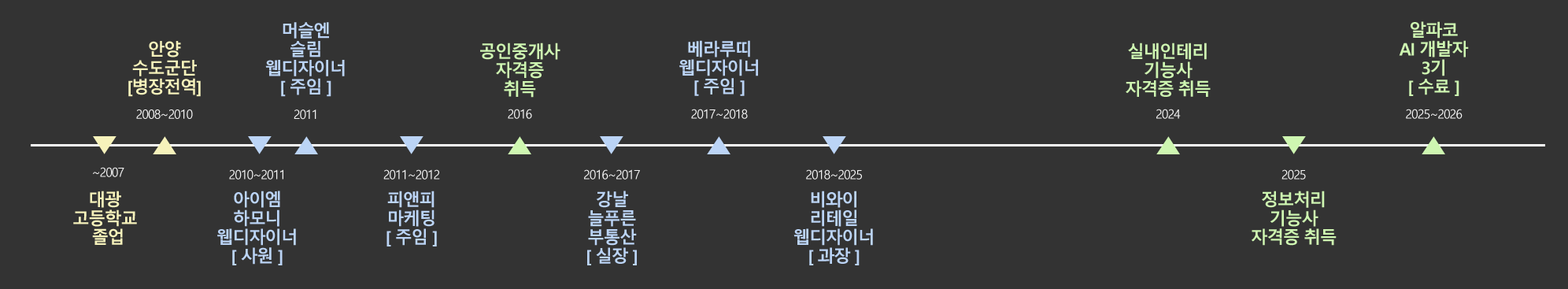
<style>
.page{position:relative;width:1568px;height:289px;background:#333333}
.page>*{position:absolute;margin:0}
.t1{font:17.3px/18.8px "MalgunGothicBold";letter-spacing:-0.07em;color:#bbd4f6}
.t2{font:17.3px/18.8px "MalgunGothicBold";letter-spacing:-0.07em;color:#cef6b1}
.t3{font:17.3px/18.8px "MalgunGothicBold";letter-spacing:-0.07em;color:#f6f2bb}
.t4{font:12.6px "MalgunGothic";letter-spacing:-0.07em;color:#f3f3f3}
</style>
<div class="page">
<p class="t1" style="left:265px;top:22px;width:80px;height:75px;text-align:center">머슬엔<br>슬림<br>웹디자이너<br>[ 주임 ]</p>
<p class="t2" style="left:1399px;top:21px;width:70px;height:75px;text-align:center">알파코<br>AI 개발자<br>3기<br>[ 수료 ]</p>
<p class="t3" style="left:128px;top:41px;width:73px;height:56px;text-align:center">안양<br>수도군단<br>[병장전역]</p>
<p class="t1" style="left:679px;top:40px;width:79px;height:56px;text-align:center">베라루띠<br>웹디자이너<br>[ 주임 ]</p>
<p class="t2" style="left:480px;top:43px;width:80px;height:55px;text-align:center">공인중개사<br>자격증<br>취득</p>
<p class="t2" style="left:1126px;top:43px;width:85px;height:54px;text-align:center">실내인테리<br>기능사<br>자격증 취득</p>
<p class="t4" style="left:136px;top:109px;width:57px;height:10px">2008~2010</p>
<p class="t4" style="left:294px;top:109px;width:22px;height:11px">2011</p>
<p class="t4" style="left:508px;top:109px;width:24px;height:10px">2016</p>
<p class="t4" style="left:691px;top:109px;width:57px;height:10px">2017~2018</p>
<p class="t4" style="left:1156px;top:109px;width:25px;height:10px">2024</p>
<p class="t4" style="left:1406px;top:109px;width:57px;height:10px">2025~2026</p>
<p class="t4" style="left:93px;top:167px;width:31px;height:10px">~2007</p>
<p class="t4" style="left:229px;top:169px;width:54px;height:10px">2010~2011</p>
<p class="t4" style="left:383px;top:169px;width:57px;height:10px">2011~2012</p>
<p class="t4" style="left:584px;top:169px;width:56px;height:10px">2016~2017</p>
<p class="t4" style="left:806px;top:169px;width:56px;height:10px">2018~2025</p>
<p class="t4" style="left:1281px;top:169px;width:25px;height:10px">2025</p>
<p class="t3" style="left:73px;top:190px;width:64px;height:55px;text-align:center">대광 <br>고등학교 <br>졸업</p>
<p class="t1" style="left:217px;top:190px;width:79px;height:75px;text-align:center">아이엠<br>하모니<br>웹디자이너<br>[ 사원 ]</p>
<p class="t1" style="left:386px;top:190px;width:51px;height:56px;text-align:center">피앤피<br>마케팅<br>[ 주임 ]</p>
<p class="t1" style="left:587px;top:190px;width:50px;height:75px;text-align:center">강날<br>늘푸른<br>부통산<br>[ 실장 ]</p>
<p class="t1" style="left:793px;top:190px;width:80px;height:75px;text-align:center">비와이<br>리테일<br>웹디자이너<br>[ 과장 ]</p>
<p class="t2" style="left:1252px;top:190px;width:85px;height:56px;text-align:center">정보처리<br>기능사<br>자격증 취득</p>
</div>
